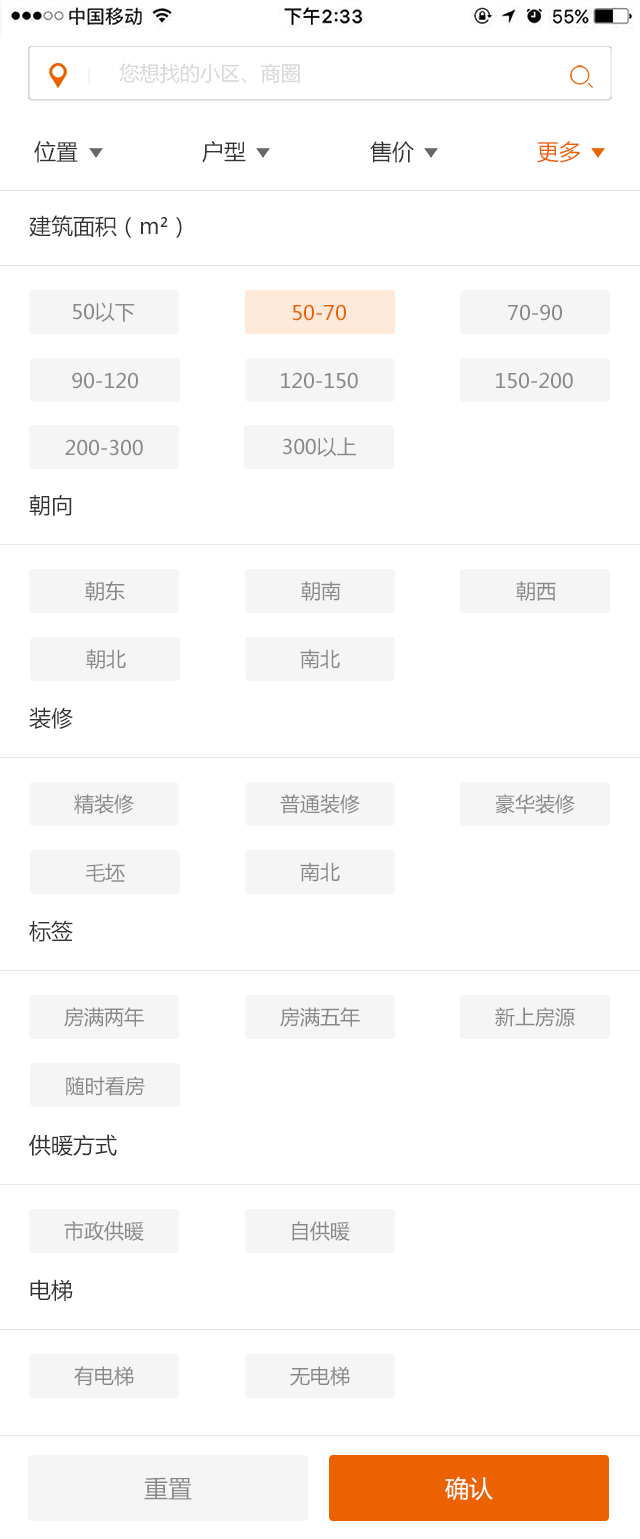
<style>
.page{position:relative;width:640px;height:1539px;background:#ffffff}
.page>*{position:absolute;margin:0}
.t1{font:22px "MicrosoftYaHei";color:#333333}
.t2{font:22px "MicrosoftYaHei";color:#ec6100}
.t3{font:20px "MicrosoftYaHei";color:#888888}
.t4{font:20px "MicrosoftYaHei";color:#ec6100}
.t5{font:24px "MicrosoftYaHei";color:#888888}
.t6{font:24px "MicrosoftYaHei";color:#ffffff}
</style>
<div class="page">
<p class="t1" style="left:34px;top:141px;width:44px;height:22px">位置</p>
<p class="t1" style="left:202px;top:141px;width:44px;height:22px">户型</p>
<p class="t1" style="left:370px;top:141px;width:44px;height:22px">售价</p>
<p class="t2" style="left:537px;top:141px;width:43px;height:22px">更多</p>
<p class="t1" style="left:29px;top:215px;width:153px;height:23px">建筑面积（m²）</p>
<p class="t3" style="left:73px;top:302px;width:62px;height:20px">50以下</p>
<p class="t4" style="left:293px;top:304px;width:53px;height:17px">50-70</p>
<p class="t3" style="left:508px;top:304px;width:54px;height:17px">70-90</p>
<p class="t3" style="left:72px;top:372px;width:66px;height:17px">90-120</p>
<p class="t3" style="left:281px;top:372px;width:77px;height:17px">120-150</p>
<p class="t3" style="left:496px;top:372px;width:77px;height:17px">150-200</p>
<p class="t3" style="left:283px;top:437px;width:73px;height:20px">300以上</p>
<p class="t3" style="left:65px;top:439px;width:78px;height:17px">200-300</p>
<p class="t1" style="left:29px;top:494px;width:43px;height:22px">朝向</p>
<p class="t3" style="left:85px;top:581px;width:40px;height:20px">朝东</p>
<p class="t3" style="left:301px;top:581px;width:40px;height:20px">朝南</p>
<p class="t3" style="left:516px;top:581px;width:40px;height:20px">朝西</p>
<p class="t3" style="left:86px;top:649px;width:40px;height:20px">朝北</p>
<p class="t3" style="left:300px;top:649px;width:40px;height:20px">南北</p>
<p class="t1" style="left:29px;top:707px;width:44px;height:22px">装修</p>
<p class="t3" style="left:74px;top:794px;width:60px;height:20px">精装修</p>
<p class="t3" style="left:280px;top:794px;width:80px;height:20px">普通装修</p>
<p class="t3" style="left:495px;top:794px;width:80px;height:20px">豪华装修</p>
<p class="t3" style="left:85px;top:863px;width:40px;height:19px">毛坯</p>
<p class="t3" style="left:300px;top:862px;width:40px;height:20px">南北</p>
<p class="t1" style="left:29px;top:920px;width:44px;height:22px">标签</p>
<p class="t3" style="left:64px;top:1007px;width:80px;height:20px">房满两年</p>
<p class="t3" style="left:280px;top:1007px;width:80px;height:20px">房满五年</p>
<p class="t3" style="left:495px;top:1007px;width:80px;height:20px">新上房源</p>
<p class="t3" style="left:66px;top:1076px;width:79px;height:20px">随时看房</p>
<p class="t1" style="left:29px;top:1134px;width:88px;height:22px">供暖方式</p>
<p class="t3" style="left:64px;top:1221px;width:80px;height:20px">市政供暖</p>
<p class="t3" style="left:292px;top:1221px;width:58px;height:20px">自供暖</p>
<p class="t1" style="left:30px;top:1279px;width:43px;height:22px">电梯</p>
<p class="t3" style="left:74px;top:1366px;width:60px;height:20px">有电梯</p>
<p class="t3" style="left:290px;top:1366px;width:60px;height:20px">无电梯</p>
<p class="t5" style="left:144px;top:1477px;width:48px;height:23px">重置</p>
<p class="t6" style="left:445px;top:1476px;width:48px;height:25px">确认</p>
</div>
